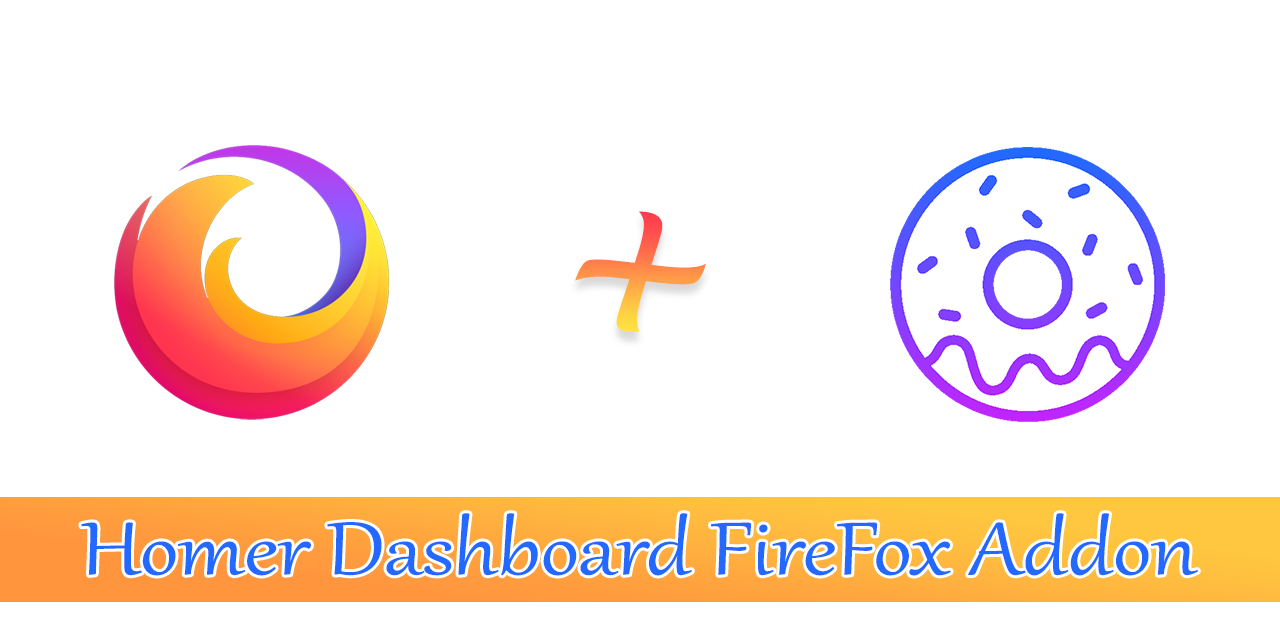
<style>
.page{position:relative;width:1280px;height:640px;background:#ffffff}
.page>*{position:absolute;margin:0}
.t1{font:229.2px "LucidaHandwriting-Italic"}
.t2{font:91.7px "Gabriola";color:#2369ff;scale:1.17 1}
</style>
<div class="page">
<p class="t1" style="left:575px;top:211px;width:131px;height:121px;rotate:7deg">+</p>
<p class="t2" style="left:81px;top:513px;width:1117px;height:63px">Homer Dashboard FireFox Addon</p>
</div>
